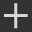
<style>
.page{position:relative;width:32px;height:32px;background:#333333}
.page>*{position:absolute;margin:0}
.t1{font:48px "Roboto-Light";letter-spacing:-0.025em;color:#d7d7d7}
</style>
<div class="page">
<p class="t1" style="left:4px;top:3px;width:24px;height:26px">+</p>
</div>
